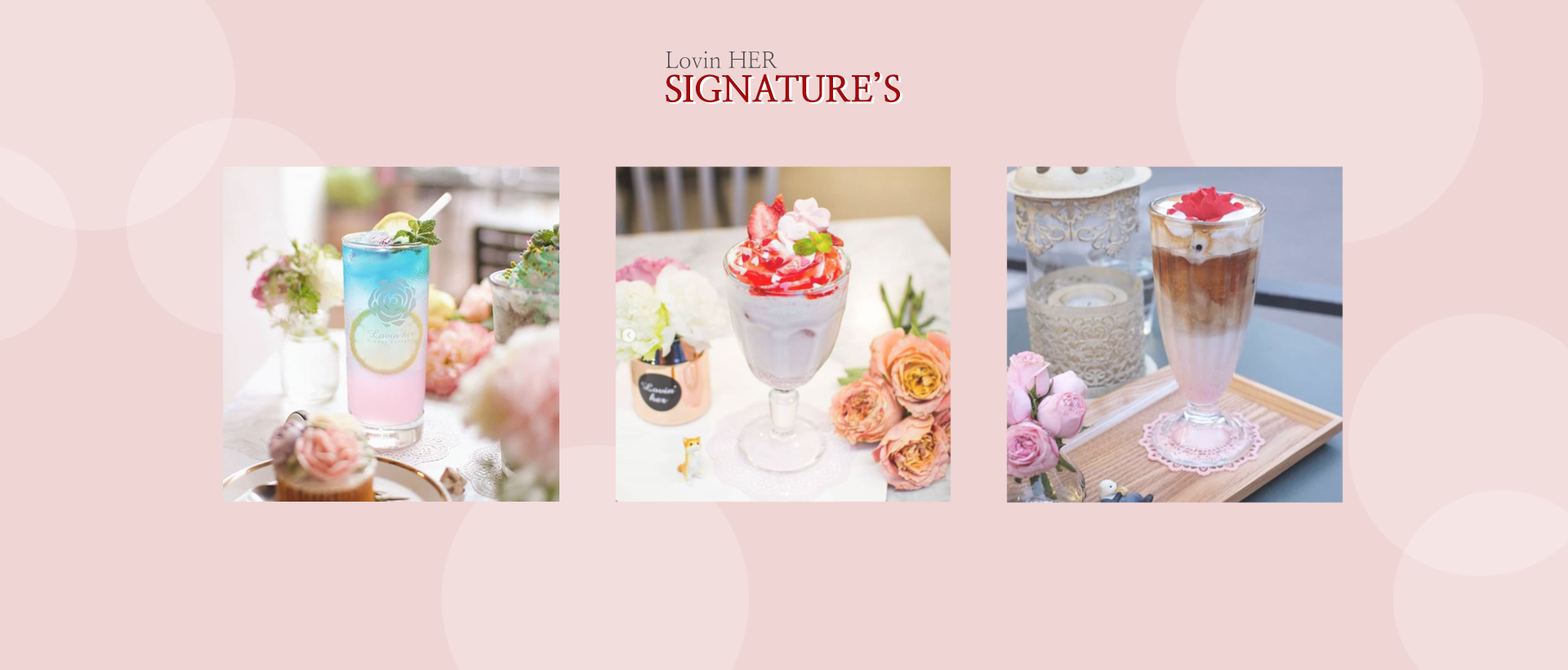
<style>
.page{position:relative;width:1568px;height:670px;background:#f0d5d5}
.page>*{position:absolute;margin:0}
.t1{font:22.6px "NanumMyeongjo";color:#514e4e}
.t2{font:36.1px "NanumMyeongjoExtraBold";color:#a00b0b}
</style>
<div class="page">
<p class="t1" style="left:666px;top:51px;width:111px;height:18px">Lovin HER</p>
<p class="t2" style="left:666px;top:72px;width:235px;height:31px">SIGNATURE’S</p>
</div>
